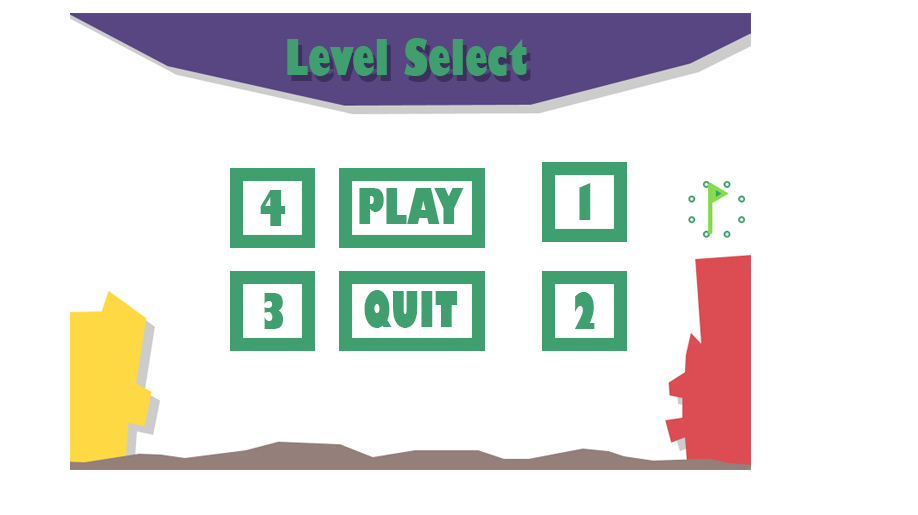
<style>
.page{position:relative;width:918px;height:515px;background:#ffffff}
.page>*{position:absolute;margin:0}
.t1{font:48px "GillSans-UltraBoldCondensed";color:#3f9f6e}
.t2{font:48px "GillSans-UltraBoldCondensed"}
</style>
<div class="page">
<p class="t1" style="left:287px;top:38px;width:240px;height:38px">Level Select</p>
<p class="t2" style="left:291px;top:44px;width:240px;height:38px">Level Select</p>
<p class="t1" style="left:579px;top:183px;width:12px;height:37px">1</p>
<p class="t1" style="left:260px;top:190px;width:26px;height:36px">4</p>
<p class="t1" style="left:359px;top:188px;width:105px;height:36px">PLAY</p>
<p class="t1" style="left:264px;top:293px;width:19px;height:36px">3</p>
<p class="t1" style="left:364px;top:290px;width:94px;height:38px">QUIT</p>
<p class="t1" style="left:575px;top:292px;width:20px;height:37px">2</p>
</div>
